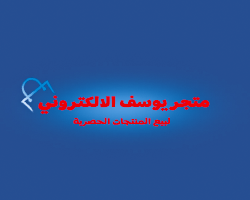
<style>
.page{position:relative;width:250px;height:200px;background:#254e92}
.page>*{position:absolute;margin:0}
.t1{font:15.6px "AdelleSansARA-Extrabold";color:#ec0005;scale:1.35 1}
.t2{font:8.6px "AmmanV3Sans-Bold";color:#ed0005;scale:1.35 1}
</style>
<div class="page">
<p class="t1" style="left:38px;top:95px;width:172px;height:19px">متجر يوسف الالكتروني</p>
<p class="t2" style="left:73px;top:117px;width:97px;height:10px">لبيع المنتجات الحصرية</p>
</div>
